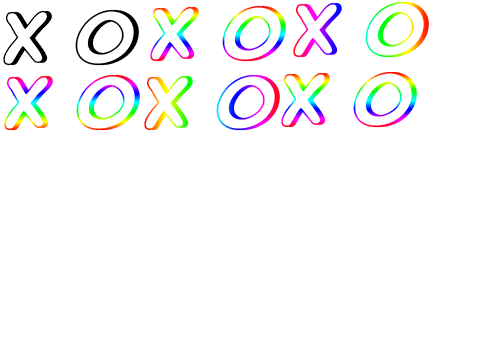
<style>
.page{position:relative;width:504px;height:360px;background:#ffffff}
.page>*{position:absolute;margin:0}
.t1{font:72px "KomikaGlaze"}
</style>
<div class="page">
<p class="t1" style="left:150px;top:5px;width:136px;height:57px">X O</p>
<p class="t1" style="left:293px;top:1px;width:136px;height:57px">X O</p>
<p class="t1" style="left:4px;top:74px;width:136px;height:57px">X O</p>
<p class="t1" style="left:144px;top:74px;width:136px;height:57px">X O</p>
<p class="t1" style="left:281px;top:71px;width:136px;height:57px">X O</p>
</div>
